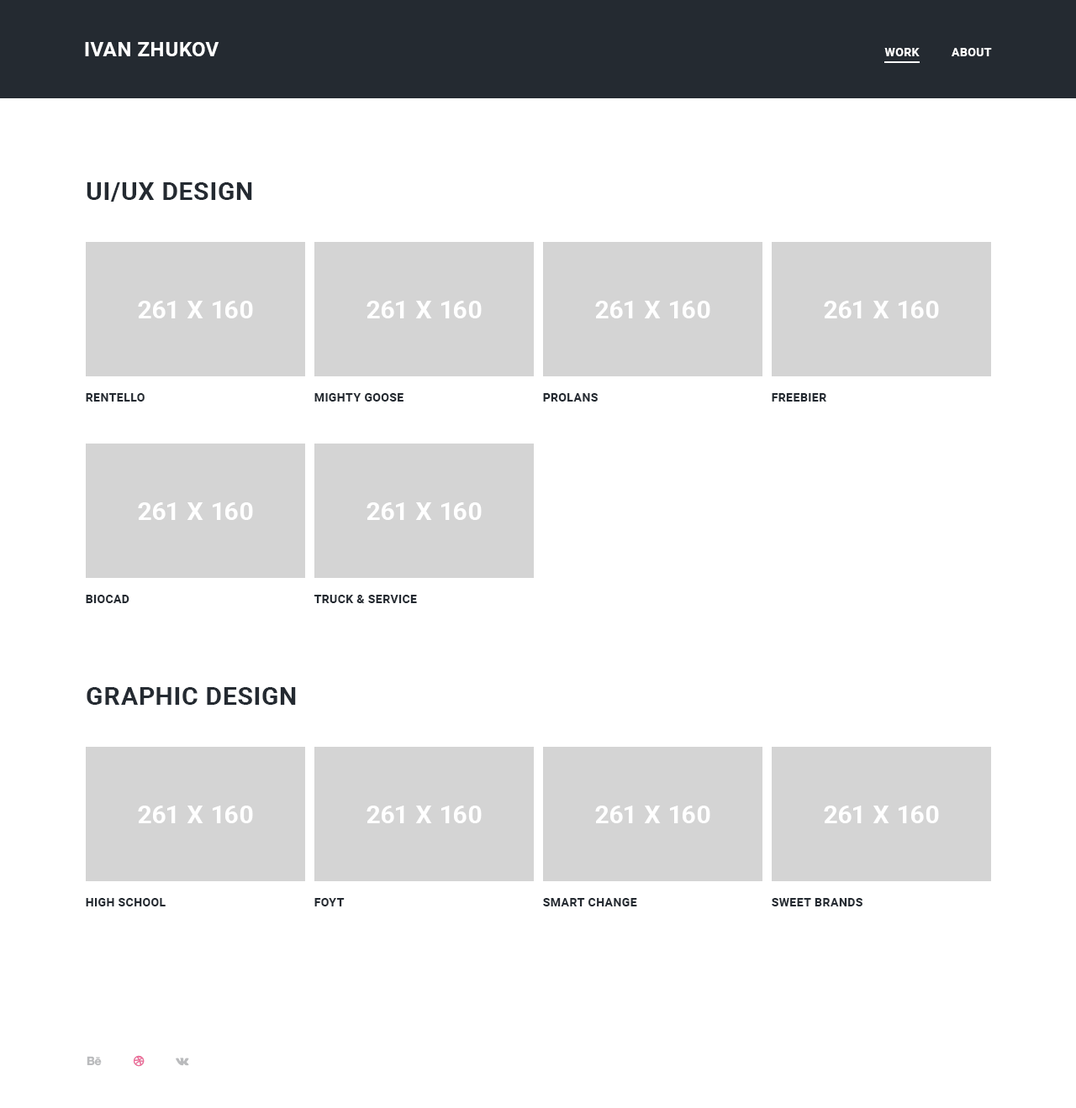
<style>
.page{position:relative;width:1076px;height:1108px;background:#ffffff}
.page>*{position:absolute;margin:0}
.t1{font:20.2px "Roboto-Bold";letter-spacing:0.025em;color:#ffffff}
.t2{font:11.8px "Roboto-Bold";letter-spacing:0.025em;color:#ffffff}
.t3{font:25.2px "Roboto-Bold";letter-spacing:0.025em;color:#242a31;text-transform:uppercase}
.t4{font:11.8px "Roboto-Bold";letter-spacing:0.025em;color:#242a31;text-transform:uppercase}
</style>
<div class="page">
<p class="t1" style="left:85px;top:42px;width:134px;height:14px">IVAN ZHUKOV</p>
<p class="t2" style="left:884px;top:48px;width:108px;height:8px">WORK          ABOUT</p>
<p class="t3" style="left:87px;top:182px;width:165px;height:20px">UI/UX DESIGN</p>
<p class="t4" style="left:86px;top:393px;width:59px;height:9px">rentello</p>
<p class="t4" style="left:314px;top:393px;width:89px;height:9px">MIGHTY GOOSE</p>
<p class="t4" style="left:543px;top:393px;width:55px;height:9px">prolans</p>
<p class="t4" style="left:771px;top:393px;width:55px;height:9px">freebier</p>
<p class="t4" style="left:86px;top:595px;width:43px;height:8px">biocad</p>
<p class="t4" style="left:313px;top:595px;width:104px;height:8px">truck &amp; service</p>
<p class="t3" style="left:87px;top:687px;width:209px;height:18px">GRAPHIC DESIGN</p>
<p class="t4" style="left:86px;top:898px;width:80px;height:9px">HIGH SCHOOL</p>
<p class="t4" style="left:314px;top:898px;width:31px;height:9px">FOYT</p>
<p class="t4" style="left:543px;top:898px;width:94px;height:9px">SMART CHANGE</p>
<p class="t4" style="left:771px;top:898px;width:91px;height:9px">SWEET BRANDS</p>
</div>
